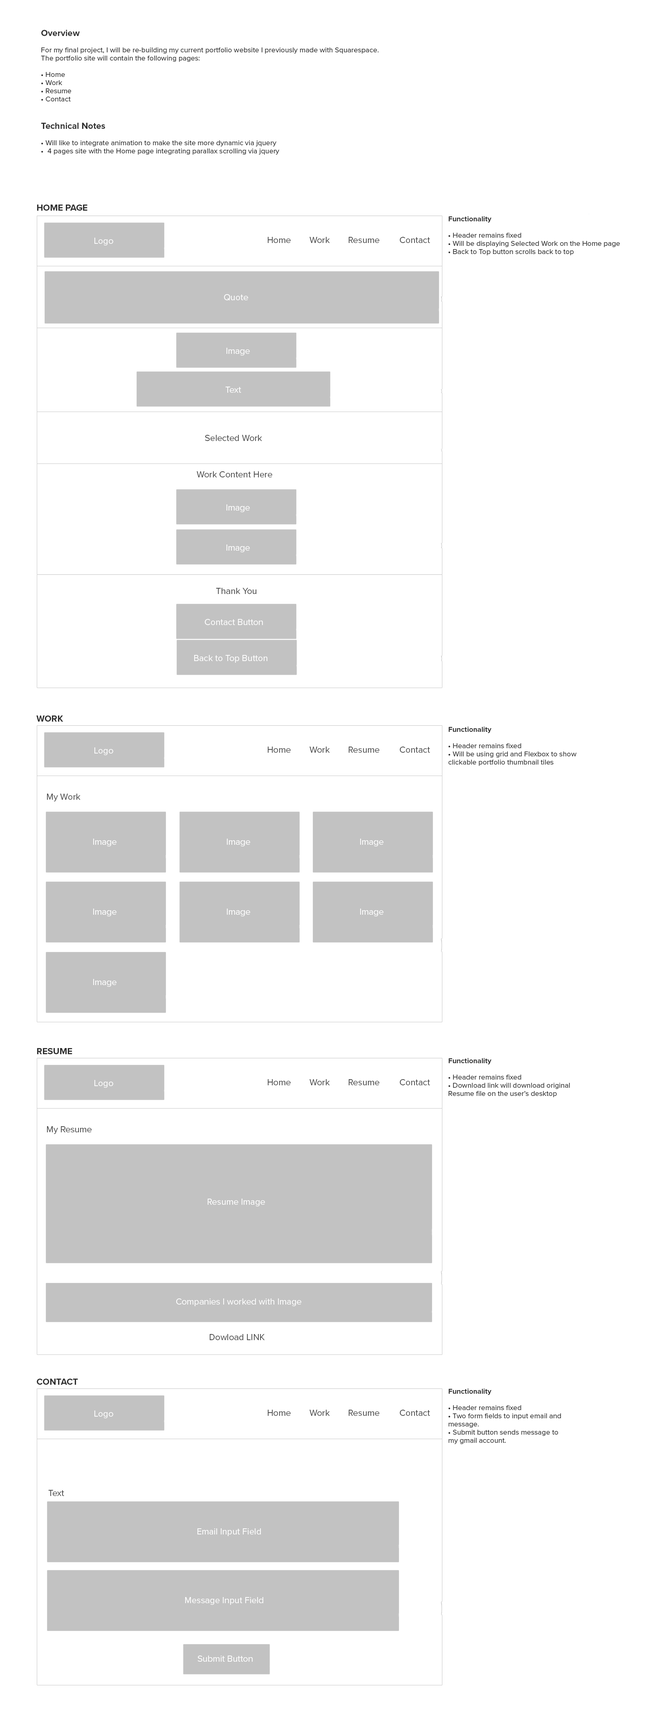
<style>
.page{position:relative;width:648px;height:1712px;background:#ffffff}
.page>*{position:absolute;margin:0}
.t1{font:7.4px/8.2px "ProximaNova-Regular";color:#2e2e2e}
.t2{font:9px/8.2px "ProximaNova-Bold";color:#2e2e2e}
.t3{font:9px "ProximaNova-Bold";color:#2e2e2e}
.t4{font:7.4px/8.2px "ProximaNova-Bold";color:#2e2e2e}
.t5{font:9px "ProximaNova-Regular";color:#ffffff}
.t6{font:9px "ProximaNova-Regular";color:#484848}
.t7{font:9px "ProximaNova-Regular";color:#474747}
</style>
<div class="page">
<p class="t1" style="left:41px;top:29px;width:338px;height:72px"><span class="t2">Overview<br><br></span>For my final project, I will be re-building my current portfolio website I previously made with Squarespace.<br>The portfolio site will contain the following pages:<br><br>• Home<br>• Work<br>• Resume<br>• Contact</p>
<p class="t1" style="left:41px;top:122px;width:238px;height:33px"><span class="t2">Technical Notes<br><br></span>• Will like to integrate animation to make the site more dynamic via jquery<br>•  4 pages site with the Home page integrating parallax scrolling via jquery</p>
<p class="t3" style="left:37px;top:205px;width:51px;height:6px">HOME PAGE</p>
<p class="t1" style="left:449px;top:216px;width:171px;height:39px"><span class="t4">Functionality<br><br></span>• Header remains fixed<br>• Will be displaying Selected Work on the Home page<br>• Back to Top button scrolls back to top</p>
<p class="t5" style="left:94px;top:238px;width:19px;height:7px">Logo</p>
<p class="t6" style="left:268px;top:237px;width:23px;height:6px">Home</p>
<p class="t6" style="left:310px;top:237px;width:20px;height:6px">Work</p>
<p class="t6" style="left:349px;top:237px;width:31px;height:6px">Resume</p>
<p class="t6" style="left:400px;top:237px;width:30px;height:6px">Contact</p>
<p class="t5" style="left:224px;top:294px;width:24px;height:7px">Quote</p>
<p class="t5" style="left:227px;top:348px;width:23px;height:8px">Image</p>
<p class="t5" style="left:225px;top:387px;width:16px;height:6px">Text</p>
<p class="t6" style="left:205px;top:435px;width:57px;height:6px">Selected Work</p>
<p class="t6" style="left:197px;top:471px;width:75px;height:6px">Work Content Here</p>
<p class="t5" style="left:227px;top:504px;width:23px;height:8px">Image</p>
<p class="t5" style="left:227px;top:544px;width:23px;height:8px">Image</p>
<p class="t6" style="left:216px;top:588px;width:40px;height:6px">Thank You</p>
<p class="t5" style="left:205px;top:619px;width:58px;height:6px">Contact Button</p>
<p class="t5" style="left:194px;top:655px;width:74px;height:8px">Back to Top Button</p>
<p class="t3" style="left:36px;top:716px;width:27px;height:6px">WORK</p>
<p class="t1" style="left:449px;top:727px;width:128px;height:39px"><span class="t4">Functionality<br><br></span>• Header remains fixed<br>• Will be using grid and Flexbox to show<br>clickable portfolio thumbnail tiles</p>
<p class="t5" style="left:94px;top:747px;width:19px;height:8px">Logo</p>
<p class="t6" style="left:268px;top:747px;width:23px;height:6px">Home</p>
<p class="t6" style="left:310px;top:747px;width:20px;height:6px">Work</p>
<p class="t6" style="left:349px;top:747px;width:31px;height:6px">Resume</p>
<p class="t6" style="left:400px;top:747px;width:30px;height:6px">Contact</p>
<p class="t6" style="left:47px;top:794px;width:34px;height:7px">My Work</p>
<p class="t5" style="left:93px;top:839px;width:24px;height:7px">Image</p>
<p class="t5" style="left:227px;top:839px;width:23px;height:7px">Image</p>
<p class="t5" style="left:360px;top:839px;width:24px;height:7px">Image</p>
<p class="t5" style="left:93px;top:909px;width:24px;height:7px">Image</p>
<p class="t5" style="left:227px;top:909px;width:23px;height:7px">Image</p>
<p class="t5" style="left:360px;top:909px;width:24px;height:7px">Image</p>
<p class="t5" style="left:93px;top:979px;width:24px;height:8px">Image</p>
<p class="t3" style="left:37px;top:1048px;width:35px;height:6px">RESUME</p>
<p class="t1" style="left:449px;top:1058px;width:121px;height:39px"><span class="t4">Functionality<br><br></span>• Header remains fixed<br>• Download link will download original<br>Resume file on the user’s desktop</p>
<p class="t5" style="left:94px;top:1080px;width:19px;height:8px">Logo</p>
<p class="t6" style="left:268px;top:1079px;width:23px;height:6px">Home</p>
<p class="t6" style="left:310px;top:1079px;width:20px;height:6px">Work</p>
<p class="t6" style="left:349px;top:1079px;width:31px;height:6px">Resume</p>
<p class="t6" style="left:400px;top:1079px;width:30px;height:6px">Contact</p>
<p class="t6" style="left:47px;top:1126px;width:45px;height:8px">My Resume</p>
<p class="t5" style="left:208px;top:1199px;width:57px;height:7px">Resume Image</p>
<p class="t5" style="left:176px;top:1298px;width:126px;height:8px">Companies I worked with Image</p>
<p class="t7" style="left:210px;top:1334px;width:55px;height:6px">Dowload LINK</p>
<p class="t3" style="left:37px;top:1379px;width:41px;height:6px">CONTACT</p>
<p class="t1" style="left:449px;top:1388px;width:112px;height:56px"><span class="t4">Functionality<br><br></span>• Header remains fixed<br>• Two form fields to input email and<br>message.<br>• Submit button sends message to<br>my gmail account.</p>
<p class="t6" style="left:268px;top:1410px;width:23px;height:6px">Home</p>
<p class="t6" style="left:310px;top:1410px;width:20px;height:6px">Work</p>
<p class="t6" style="left:349px;top:1410px;width:31px;height:6px">Resume</p>
<p class="t6" style="left:400px;top:1410px;width:30px;height:6px">Contact</p>
<p class="t5" style="left:94px;top:1411px;width:19px;height:7px">Logo</p>
<p class="t6" style="left:48px;top:1490px;width:16px;height:6px">Text</p>
<p class="t5" style="left:198px;top:1528px;width:63px;height:8px">Email Input Field</p>
<p class="t5" style="left:185px;top:1597px;width:78px;height:8px">Message Input Field</p>
<p class="t5" style="left:198px;top:1656px;width:55px;height:6px">Submit Button</p>
</div>
